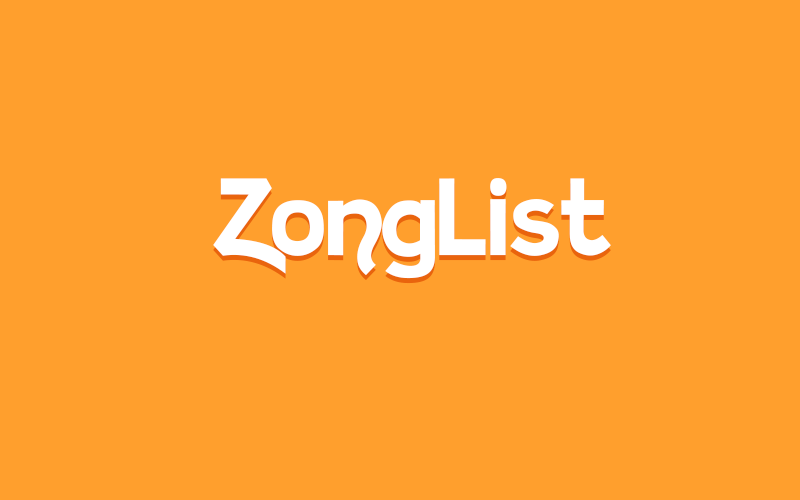
<style>
.page{position:relative;width:800px;height:500px;background:#ff9f2d}
.page>*{position:absolute;margin:0}
.t1{font:112px "KingthingsSans";color:#ffffff}
</style>
<div class="page">
<p class="t1" style="left:213px;top:178px;width:398px;height:101px">ZongList</p>
</div>
